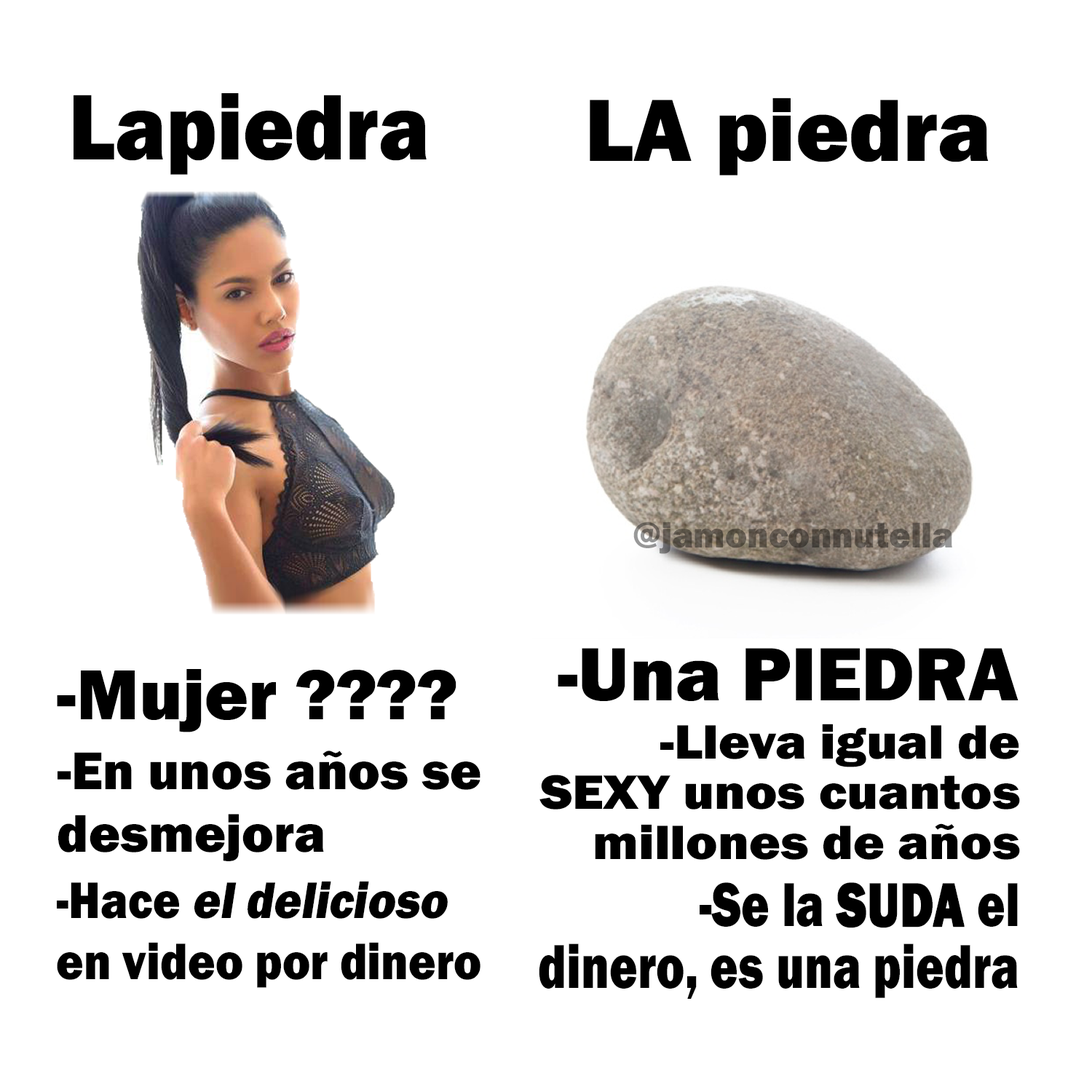
<style>
.page{position:relative;width:1092px;height:1092px;background:#ffffff}
.page>*{position:absolute;margin:0}
.t1{font:96.4px "FranklinGothic-Heavy";color:#000000;scale:0.9 1}
.t2{font:91.3px "FranklinGothic-Heavy";color:#000000}
.t3{font:37px "FranklinGothic-Heavy";color:#5c544b}
.t4{font:78.1px "FranklinGothic-Heavy";color:#000000}
.t5{font:73.2px "FranklinGothic-Heavy";color:#000000}
.t6{font:50px "FranklinGothic-Heavy";color:#000000;scale:1.07 1}
.t7{font:54.7px "FranklinGothic-Heavy";color:#000000}
.t8{font:53.1px "FranklinGothic-Heavy";color:#000000;scale:0.88 1}
.t9{font:53.1px "FranklinGothic-Heavy";color:#000000;font-style:italic;scale:0.88 1}
.t10{font:64px "FranklinGothic-Heavy";color:#000000;scale:0.75 1}
.t11{font:64px "FranklinGothic-Heavy";color:#000000;font-weight:bold;scale:0.75 1}
</style>
<div class="page">
<p class="t1" style="left:74px;top:93px;width:353px;height:82px">Lapiedra</p>
<p class="t2" style="left:590px;top:98px;width:399px;height:77px">LA piedra</p>
<p class="t3" style="left:633px;top:522px;width:319px;height:32px">@jamonconnutella</p>
<p class="t4" style="left:558px;top:648px;width:460px;height:53px">-Una PIEDRA</p>
<p class="t5" style="left:57px;top:669px;width:399px;height:63px">-Mujer ????</p>
<p class="t6" style="left:539px;top:724px;width:481px;height:136px;text-align:right">-Lleva igual de<br>SEXY unos cuantos<br>millones de años</p>
<p class="t7" style="left:58px;top:751px;width:422px;height:110px">-En unos años se<br>desmejora</p>
<p class="t8" style="left:57px;top:881px;width:423px;height:107px">-Hace <span class="t9">el delicioso<br></span>en video por dinero</p>
<p class="t10" style="left:539px;top:882px;width:479px;height:117px;text-align:right">-Se la <span class="t11">SUDA</span> el<br>dinero, es una piedra</p>
</div>
